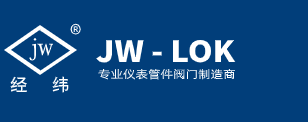
<style>
.page{position:relative;width:308px;height:122px;background:#013e7a}
.page>*{position:absolute;margin:0}
.t1{font:24px "SourceHanSansSC-Regular";color:#ffffff}
.t2{font:21px "LibreBaskerville-Regular";color:#ffffff;scale:0.88 1}
.t3{font:29.1px "SourceHanSansSC-Heavy";color:#ffffff;scale:1.08 1}
.t4{font:17px "SourceHanSansSC-Medium";letter-spacing:0.25em;color:#ffffff}
.t5{font:11px "AlibabaPuHuiTiR";letter-spacing:0.31em;color:#ffffff;scale:1.16 1}
</style>
<div class="page">
<p class="t1" style="left:70px;top:23px;width:11px;height:12px">®</p>
<p class="t2" style="left:29px;top:38px;width:25px;height:23px">jw</p>
<p class="t3" style="left:96px;top:39px;width:140px;height:24px">JW - LOK</p>
<p class="t4" style="left:10px;top:76px;width:59px;height:17px">经  纬</p>
<p class="t5" style="left:98px;top:69px;width:138px;height:11px">专业仪表管件阀门制造商</p>
</div>
